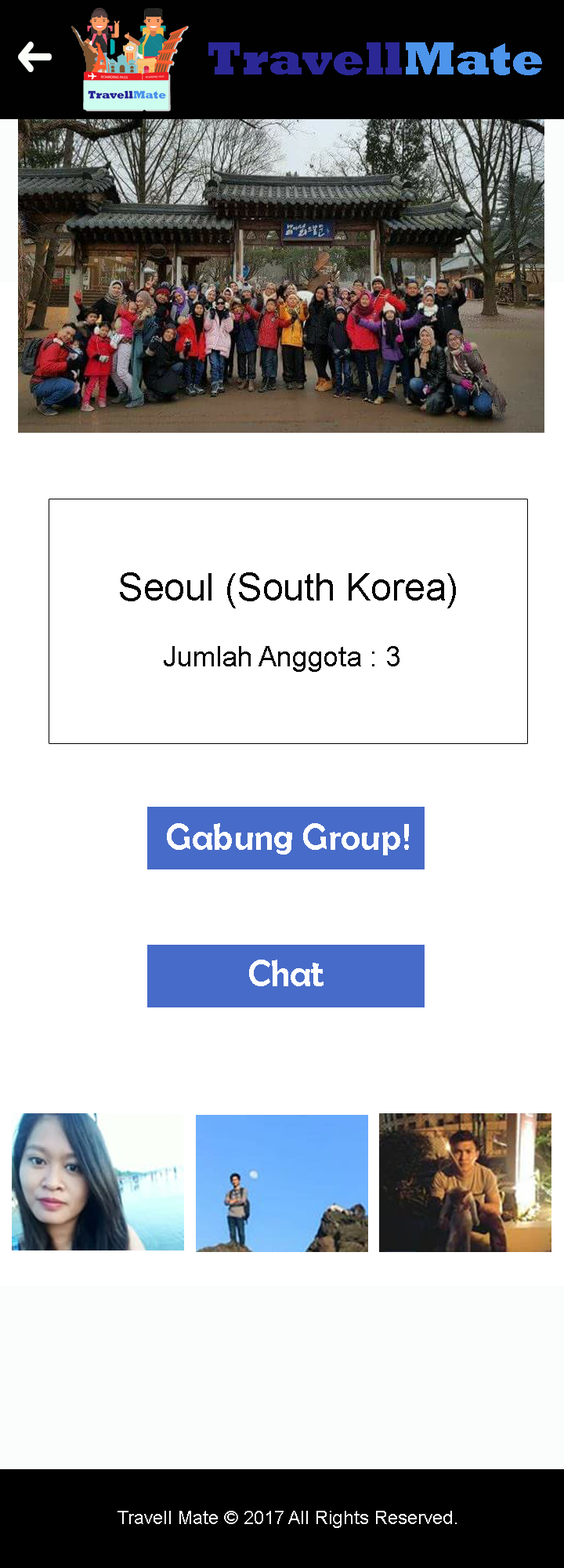
<style>
.page{position:relative;width:564px;height:1568px;background:#ffffff}
.page>*{position:absolute;margin:0}
.t1{font:47px "Rockwell-ExtraBold";color:#2b2896}
.t2{font:47px "Rockwell-ExtraBold";color:#4d94eb}
.t3{font:37.6px "ArialMT";color:#050505}
.t4{font:28.2px "ArialMT";color:#050505}
.t5{font:37.6px "BerlinSansFB-Reg";color:#fdfdfe}
.t6{font:18.8px "ArialMT";color:#fdfdfe}
</style>
<div class="page">
<p class="t1" style="left:209px;top:42px;width:334px;height:33px">Travell<span class="t2">Mate</span></p>
<p class="t3" style="left:120px;top:572px;width:336px;height:36px">Seoul (South Korea)</p>
<p class="t4" style="left:164px;top:646px;width:236px;height:26px">Jumlah Anggota : 3</p>
<p class="t5" style="left:167px;top:823px;width:242px;height:32px">Gabung Group!</p>
<p class="t5" style="left:249px;top:960px;width:75px;height:26px">Chat</p>
<p class="t6" style="left:118px;top:1511px;width:339px;height:17px">Travell Mate © 2017 All Rights Reserved.</p>
</div>
